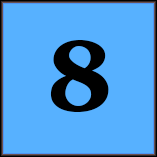
<style>
.page{position:relative;width:157px;height:157px;background:#57b1ff}
.page>*{position:absolute;margin:0}
.t1{font:110px "ARJULIAN";color:#000000}
</style>
<div class="page">
<p class="t1" style="left:50px;top:40px;width:59px;height:72px">8</p>
</div>
